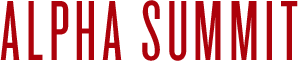
<style>
.page{position:relative;width:298px;height:61px;background:#ffffff}
.page>*{position:absolute;margin:0}
.t1{font:88.5px "Knockout-26JuniorFlywght";letter-spacing:0.06em;color:#ad020b;text-transform:uppercase}
</style>
<div class="page">
<p class="t1" style="left:0px;top:0px;width:298px;height:61px">alpha summit</p>
</div>
